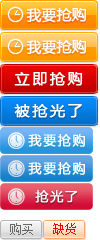
<style>
.page{position:relative;width:100px;height:240px}
.page>*{position:absolute;margin:0}
.t1{font:14.6px "MicrosoftYaHei";color:#ffffff;font-weight:bold}
.t2{font:14.6px "MicrosoftYaHei";letter-spacing:0.18em;color:#ffffff;font-weight:bold}
.t3{font:13px "MicrosoftYaHei";letter-spacing:0.1em;color:#ffffff;font-weight:bold}
</style>
<div class="page">
<p class="t1" style="left:26px;top:8px;width:61px;height:15px">我要抢购</p>
<p class="t1" style="left:26px;top:40px;width:61px;height:15px">我要抢购</p>
<p class="t2" style="left:14px;top:72px;width:69px;height:14px">立即抢购</p>
<p class="t2" style="left:14px;top:104px;width:68px;height:14px">被抢光了</p>
<p class="t3" style="left:28px;top:134px;width:57px;height:13px">我要抢购</p>
<p class="t3" style="left:28px;top:162px;width:57px;height:13px">我要抢购</p>
<p class="t3" style="left:35px;top:190px;width:42px;height:13px">抢光了</p>
</div>
